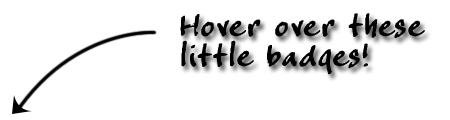
<style>
.page{position:relative;width:450px;height:120px;background:#ffffff}
.page>*{position:absolute;margin:0}
.t1{font:44px/30px "CrappyJoe";color:#010101}
</style>
<div class="page">
<p class="t1" style="left:180px;top:13px;width:245px;height:62px">Hover over these<br>little badges!</p>
</div>
